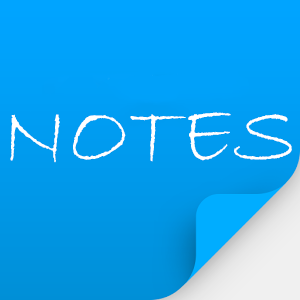
<style>
.page{position:relative;width:300px;height:300px}
.page>*{position:absolute;margin:0}
.t1{font:87px "BradleyHandITC";letter-spacing:0.01em;color:#ffffff}
</style>
<div class="page">
<p class="t1" style="left:10px;top:112px;width:282px;height:51px">NOTES</p>
</div>
